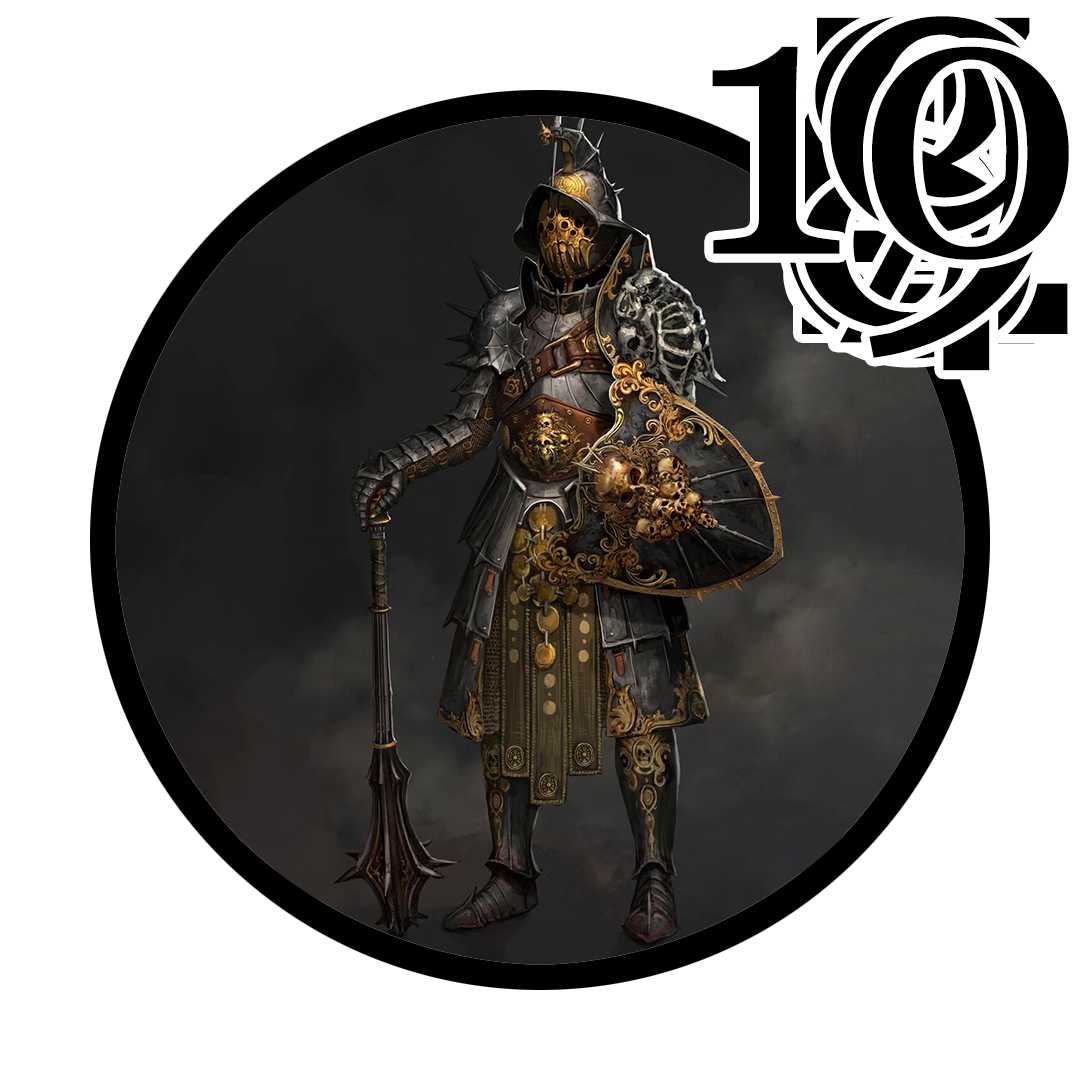
<style>
.page{position:relative;width:1080px;height:1080px;background:#ffffff}
.page>*{position:absolute;margin:0}
.t1{font:473.8px "Georgia";color:#000000}
.t2{font:383.3px "Georgia";color:#000000}
</style>
<div class="page">
<p class="t1" style="left:830px;top:16px;width:226px;height:342px">9</p>
<p class="t2" style="left:712px;top:46px;width:357px;height:214px">10</p>
</div>
